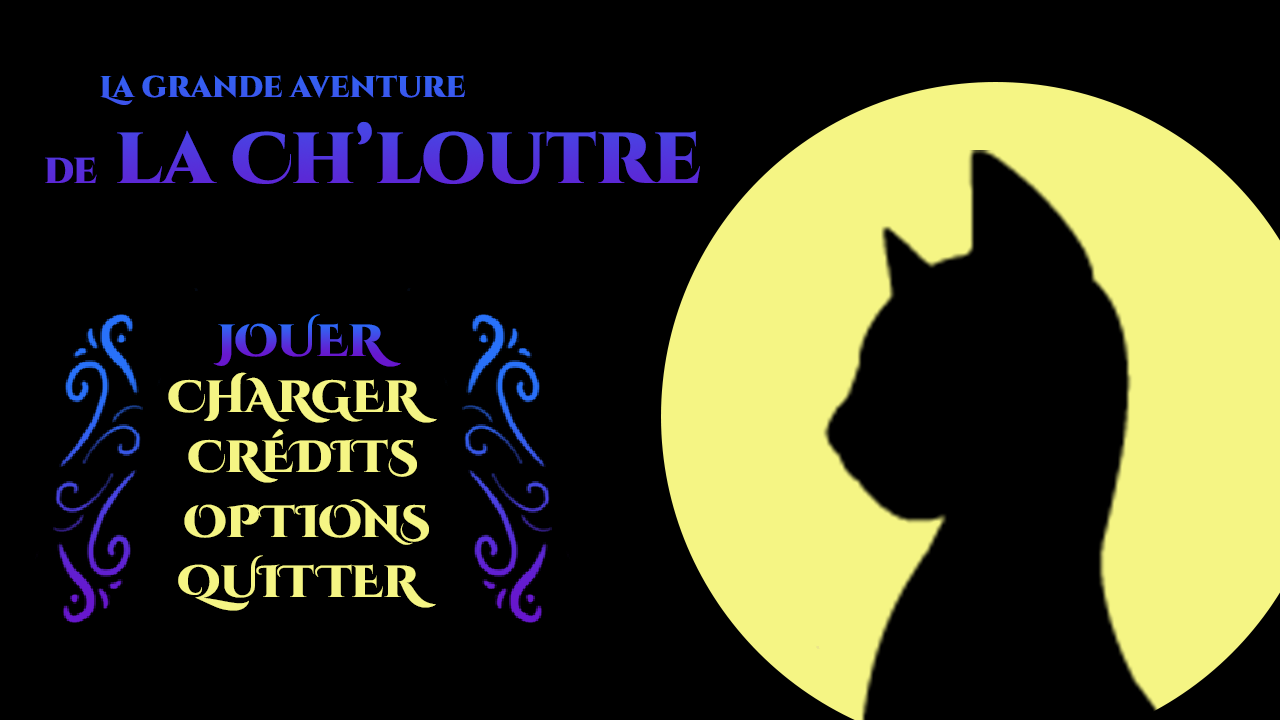
<style>
.page{position:relative;width:1280px;height:720px;background:#000000}
.page>*{position:absolute;margin:0}
.t1{font:30px "CinzelDecorative-Black";color:#5137dd}
.t2{font:36px "CinzelDecorative-Black";color:#5137dd}
.t3{font:72px "CinzelDecorative-Black";color:#5137dd}
.t4{font:45px "CinzelDecorative-Black"}
.t5{font:45px "CinzelDecorative-Black";color:#f5f584}
</style>
<div class="page">
<p class="t1" style="left:45px;top:75px;width:655px;height:109px;text-align:center">La grande aventure<br>     <span class="t2">de</span><span class="t3"> la Ch’loutre</span></p>
<p class="t4" style="left:213px;top:314px;width:188px;height:53px">JOUER</p>
<p class="t5" style="left:168px;top:372px;width:269px;height:51px">CHARGER</p>
<p class="t5" style="left:188px;top:429px;width:229px;height:54px">CRÉDITS</p>
<p class="t5" style="left:184px;top:499px;width:245px;height:46px">OPTIONS</p>
<p class="t5" style="left:178px;top:555px;width:258px;height:56px">QUITTER</p>
</div>
